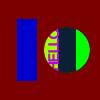
<style>
.page{position:relative;width:100px;height:100px;background:#7b0000}
.page>*{position:absolute;margin:0}
.t1{font:14px "ArialMT";letter-spacing:-0.068em;color:#bb00ff;font-weight:bold}
</style>
<div class="page">
<p class="t1" style="left:48px;top:28px;width:12px;height:43px;rotate:-90deg">HELLO</p>
</div>
